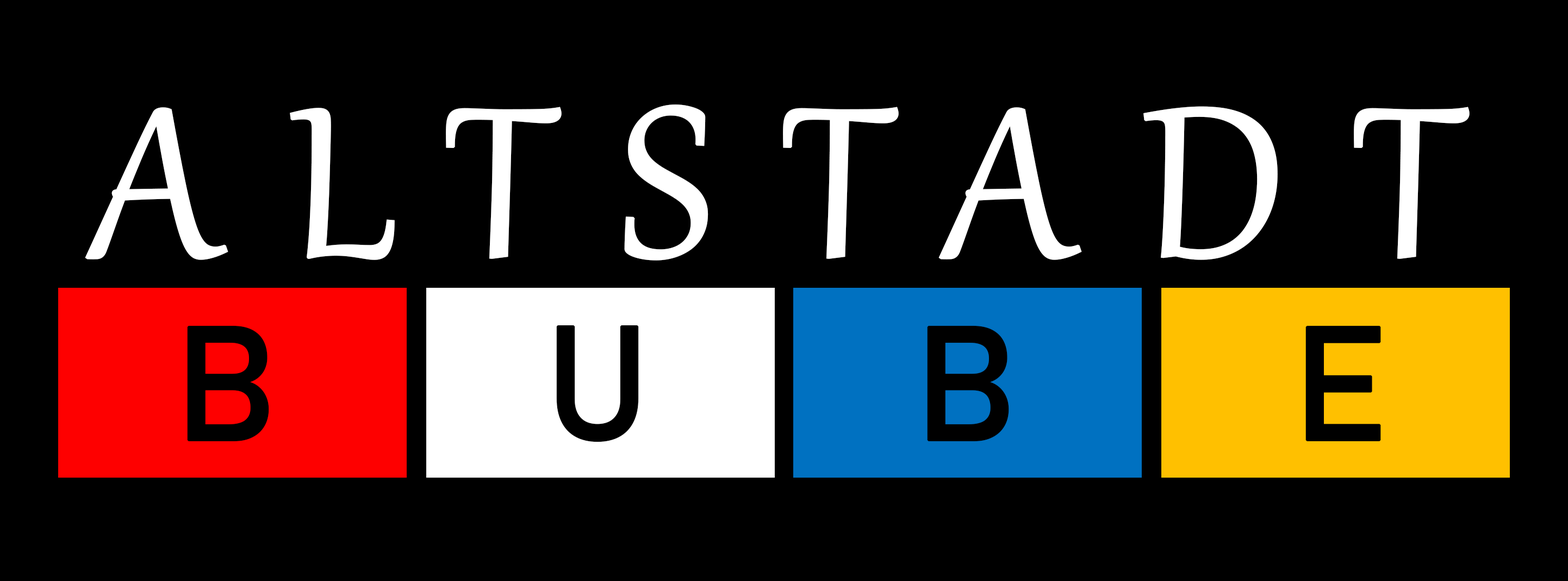
<style>
.page{position:relative;width:1568px;height:581px;background:#000000}
.page>*{position:absolute;margin:0}
.t1{font:261px "Gabriola";letter-spacing:0.245em;color:#ffffff;font-weight:bold}
.t2{font:159.5px "Bahnschrift";letter-spacing:0.197em;color:#000000;font-weight:bold}
</style>
<div class="page">
<p class="t1" style="left:85px;top:104px;width:1385px;height:156px">ALTSTADT</p>
<p class="t2" style="left:187px;top:325px;width:82px;height:116px">B</p>
<p class="t2" style="left:556px;top:325px;width:83px;height:117px">U</p>
<p class="t2" style="left:927px;top:325px;width:82px;height:116px">B</p>
<p class="t2" style="left:1305px;top:325px;width:76px;height:116px">E</p>
</div>
